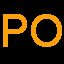
<style>
.page{position:relative;width:64px;height:64px;background:#000000}
.page>*{position:absolute;margin:0}
.t1{font:44px "ArialMT";color:#fba00d;font-weight:bold}
</style>
<div class="page">
<p class="t1" style="left:3px;top:14px;width:59px;height:33px">PO</p>
</div>
